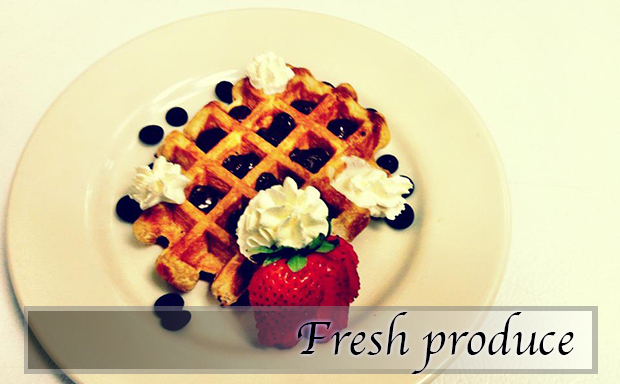
<style>
.page{position:relative;width:620px;height:384px}
.page>*{position:absolute;margin:0}
.t1{font:48px "Apple-Chancery";color:#000000}
</style>
<div class="page">
<p class="t1" style="left:297px;top:312px;width:277px;height:62px">Fresh produce</p>
</div>
